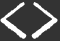
<style>
.page{position:relative;width:60px;height:41px;background:#333333}
.page>*{position:absolute;margin:0}
.t1{font:72px "IM_FELL_DW_Pica_SC";letter-spacing:-0.005em;color:#ffffff}
</style>
<div class="page">
<p class="t1" style="left:0px;top:2px;width:27px;height:37px;rotate:180deg">&gt;</p>
<p class="t1" style="left:31px;top:2px;width:27px;height:37px">&gt;</p>
</div>
